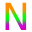
<style>
.page{position:relative;width:32px;height:32px;background:#ffffff}
.page>*{position:absolute;margin:0}
.t1{font:37.3px "DejaVuSans"}
</style>
<div class="page">
<p class="t1" style="left:5px;top:2px;width:22px;height:28px">N</p>
</div>
